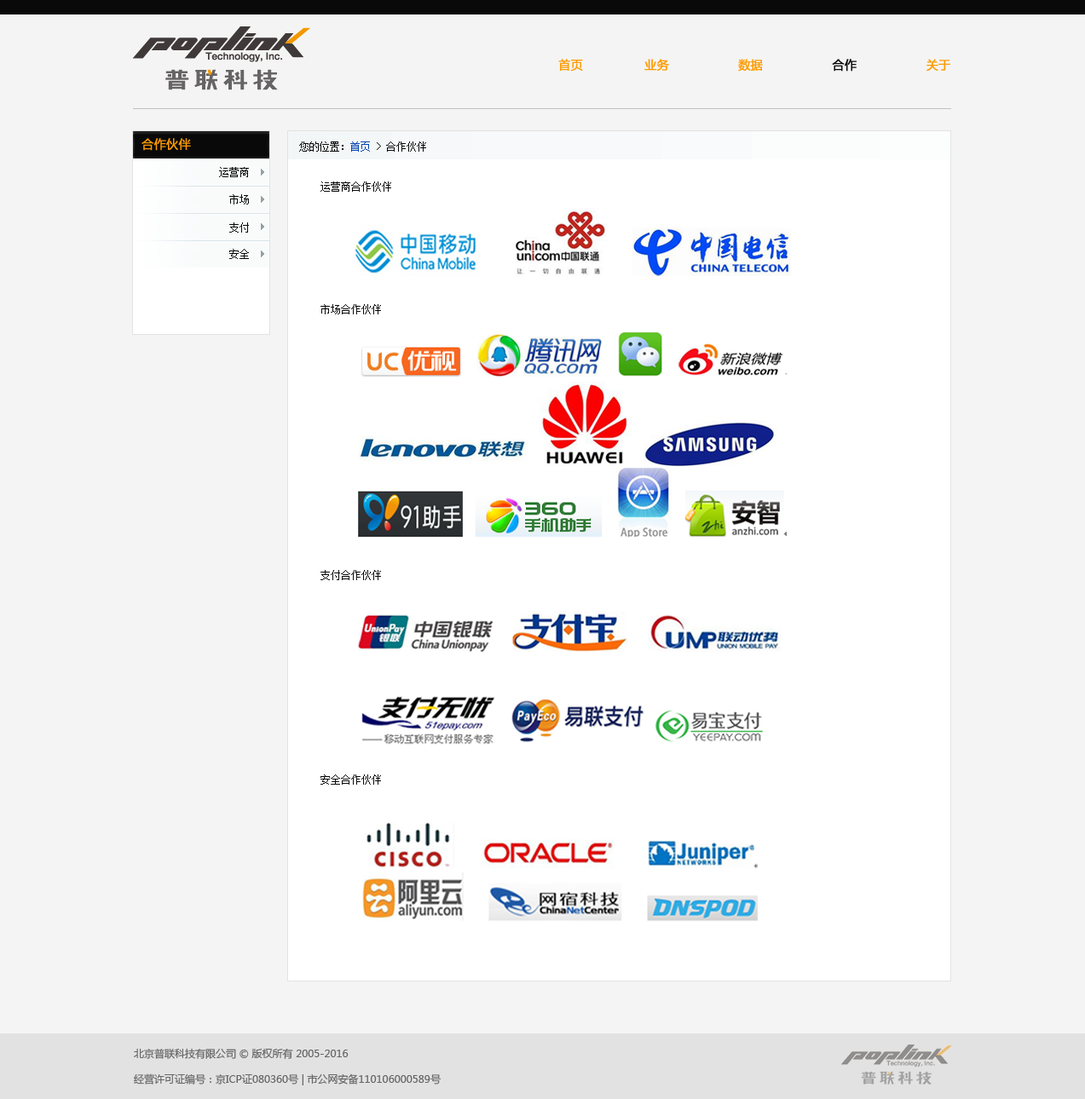
<style>
.page{position:relative;width:1085px;height:1099px;background:#f4f4f4}
.page>*{position:absolute;margin:0}
.t1{font:11.9px "MicrosoftYaHei";color:#fe9b00;text-transform:uppercase;font-weight:bold}
.t2{font:11.9px "MicrosoftYaHei";color:#090909;text-transform:uppercase;font-weight:bold}
.t3{font:11.9px "MicrosoftYaHei";color:#fe9b00;font-weight:bold}
.t4{font:10.2px "SimSun";color:#090909;text-transform:uppercase}
.t5{font:10.2px "SimSun";color:#0146af;text-transform:uppercase}
.t6{font:10.2px/20.5px "SimSun";color:#090909;text-transform:uppercase}
.t7{font:10.2px/25.6px "MicrosoftYaHei";color:#666666}
</style>
<div class="page">
<p class="t1" style="left:558px;top:59px;width:392px;height:13px">首页                业务                  数据                  <span class="t2">合作</span>                  关于</p>
<p class="t3" style="left:141px;top:138px;width:50px;height:13px">合作伙伴</p>
<p class="t4" style="left:299px;top:141px;width:127px;height:11px">您的位置：<span class="t5">首页 </span>&gt; 合作伙伴</p>
<p class="t4" style="left:219px;top:167px;width:30px;height:10px">运营商</p>
<p class="t6" style="left:320px;top:182px;width:71px;height:603px">运营商合作伙伴<br><br><br><br><br><br>市场合作伙伴<br><br><br><br><br><br><br><br><br><br><br><br><br>支付合作伙伴<br><br><br><br><br><br><br><br><br><br>安全合作伙伴</p>
<p class="t4" style="left:229px;top:194px;width:20px;height:11px">市场</p>
<p class="t4" style="left:229px;top:222px;width:20px;height:11px">支付</p>
<p class="t4" style="left:229px;top:249px;width:20px;height:10px">安全</p>
<p class="t7" style="left:134px;top:1048px;width:307px;height:38px">北京普联科技有限公司 © 版权所有 2005-2016<br>经营许可证编号：京ICP证080360号 | 市公网安备110106000589号</p>
</div>
